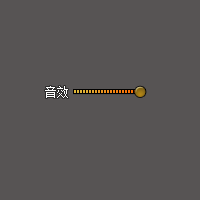
<style>
.page{position:relative;width:200px;height:200px;background:#575454}
.page>*{position:absolute;margin:0}
.t1{font:12px "SimSun";color:#ffffff}
</style>
<div class="page">
<p class="t1" style="left:45px;top:86px;width:23px;height:12px">音效</p>
</div>
